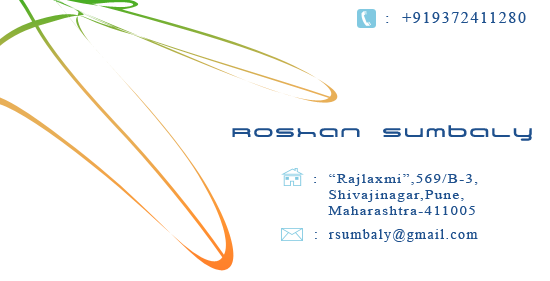
<style>
.page{position:relative;width:550px;height:281px;background:#ffffff}
.page>*{position:absolute;margin:0}
.t1{font:16px "TimesNewRomanPSMT";letter-spacing:0.1em;color:#1e508d}
.t2{font:30px "BNYear2000";letter-spacing:0.1em;color:#1e508d;scale:1.1 1}
.t3{font:12.2px/16px "TimesNewRomanPSMT";letter-spacing:0.1em;color:#1e508d;scale:1.2 1}
.t4{font:14px "TimesNewRomanPSMT";letter-spacing:0.1em;color:#1e508d}
</style>
<div class="page">
<p class="t1" style="left:386px;top:12px;width:140px;height:11px">:  +919372411280</p>
<p class="t2" style="left:232px;top:125px;width:300px;height:16px">Roshan sumbaly</p>
<p class="t3" style="left:314px;top:174px;width:164px;height:41px">:  “Rajlaxmi”,569/B-3,  <br>   Shivajinagar,Pune, <br>   Maharashtra-411005</p>
<p class="t4" style="left:315px;top:229px;width:163px;height:13px">:  rsumbaly@gmail.com</p>
</div>
